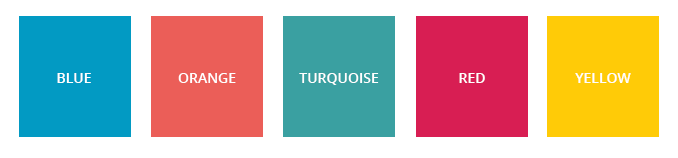
<style>
.page{position:relative;width:678px;height:158px;background:#ffffff}
.page>*{position:absolute;margin:0}
.t1{font:14px "OpenSans-Semibold";color:#ffffff;text-transform:uppercase}
</style>
<div class="page">
<p class="t1" style="left:57px;top:73px;width:34px;height:10px">Blue</p>
<p class="t1" style="left:178px;top:73px;width:58px;height:10px">orange</p>
<p class="t1" style="left:299px;top:73px;width:80px;height:12px">turquoise</p>
<p class="t1" style="left:459px;top:73px;width:26px;height:10px">Red</p>
<p class="t1" style="left:575px;top:73px;width:56px;height:10px">Yellow</p>
</div>
